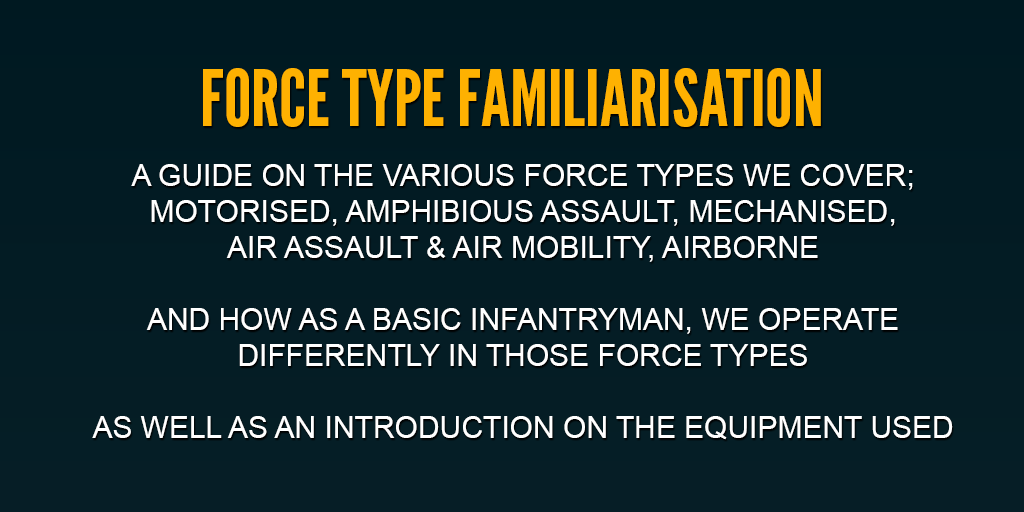
<style>
.page{position:relative;width:1024px;height:512px}
.page>*{position:absolute;margin:0}
.t1{font:78px "LeagueGothic";color:#feb101}
.t2{font:30px "ArialMT";color:#ffffff}
</style>
<div class="page">
<p class="t1" style="left:203px;top:68px;width:618px;height:59px">FORCE TYPE FAMILIARISATION</p>
<p class="t2" style="left:92px;top:164px;width:861px;height:276px;text-align:center">A GUIDE ON THE VARIOUS FORCE TYPES WE COVER;<br>MOTORISED, AMPHIBIOUS ASSAULT, MECHANISED, <br>AIR ASSAULT &amp; AIR MOBILITY, AIRBORNE<br><br>AND HOW AS A BASIC INFANTRYMAN, WE OPERATE <br>DIFFERENTLY IN THOSE FORCE TYPES<br><br>AS WELL AS AN INTRODUCTION ON THE EQUIPMENT USED</p>
</div>
